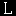
<style>
.page{position:relative;width:16px;height:16px;background:#000000}
.page>*{position:absolute;margin:0}
.t1{font:17px "JosefinSlab-SemiBold";color:#ffffff}
</style>
<div class="page">
<p class="t1" style="left:4px;top:2px;width:8px;height:12px">L</p>
</div>
